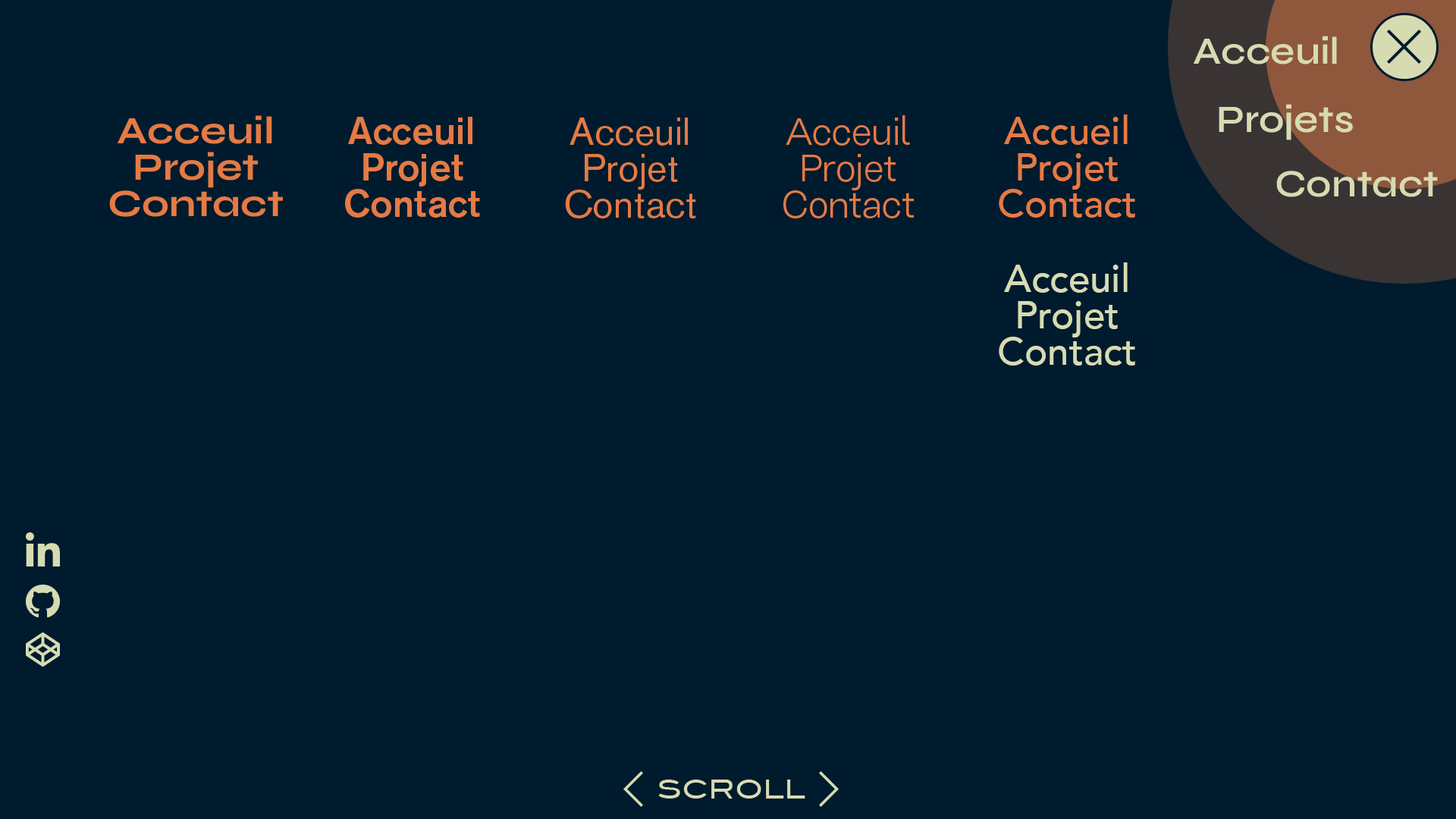
<style>
.page{position:relative;width:1456px;height:819px;background:#001b2e}
.page>*{position:absolute;margin:0}
.t1{font:38.7px "Syne-SemiBold";color:#d6dbb2}
.t2{font:38.7px/36.4px "Syne-Bold";color:#e57a44}
.t3{font:38.7px/36.4px "AkzidenzGroteskBE-Md";color:#e57a44}
.t4{font:38.7px/36.4px "AkzidenzGroteskBE-Regular";color:#e57a44}
.t5{font:38.7px/36.4px "ResistSansText-Light";color:#e57a44}
.t6{font:38.7px/36.4px "Avenir-Medium";color:#e57a44}
.t7{font:38.7px/36.4px "Avenir-Medium";color:#d6dbb2}
.t8{font:25.8px "BlairMdITCTTMedium";color:#d6dbb2}
</style>
<div class="page">
<p class="t1" style="left:1194px;top:36px;width:143px;height:28px">Acceuil</p>
<p class="t1" style="left:1219px;top:104px;width:134px;height:36px">Projets</p>
<p class="t2" style="left:109px;top:115px;width:174px;height:102px;text-align:center">Acceuil<br>Projet<br>Contact</p>
<p class="t3" style="left:345px;top:117px;width:135px;height:101px;text-align:center">Acceuil<br>Projet<br>Contact</p>
<p class="t4" style="left:565px;top:118px;width:131px;height:100px;text-align:center">Acceuil<br>Projet<br>Contact</p>
<p class="t5" style="left:783px;top:115px;width:131px;height:103px;text-align:center">Acceuil<br>Projet<br>Contact</p>
<p class="t6" style="left:999px;top:115px;width:136px;height:103px;text-align:center">Accueil<br>Projet<br>Contact</p>
<p class="t1" style="left:1276px;top:171px;width:162px;height:26px">Contact</p>
<p class="t7" style="left:999px;top:262px;width:136px;height:104px;text-align:center">Acceuil<br>Projet<br>Contact</p>
<p class="t8" style="left:658px;top:780px;width:147px;height:19px">SCROLL</p>
</div>
